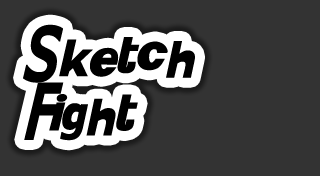
<style>
.page{position:relative;width:320px;height:176px;background:#333333}
.page>*{position:absolute;margin:0}
.t1{font:48px "KittyKatt";color:#000000}
</style>
<div class="page">
<p class="t1" style="left:23px;top:24px;width:172px;height:117px">Sketch Fight</p>
</div>
